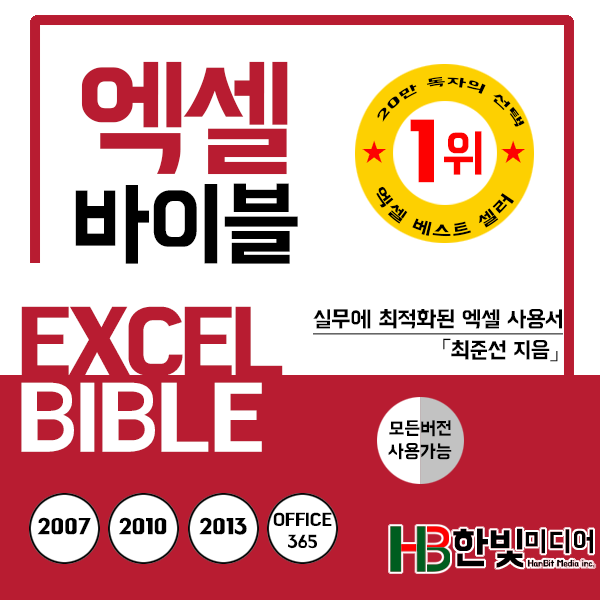
<style>
.page{position:relative;width:600px;height:600px;background:#ffffff}
.page>*{position:absolute;margin:0}
.t1{font:94.7px/123.1px "BMHANNAPro";letter-spacing:-0.025em;color:#000000}
.t2{font:132.6px/9.5px "BMHANNAPro";letter-spacing:-0.065em;color:#b81c31}
.t3{font:11.7px "BMHANNAPro";letter-spacing:0.035em;color:#000000}
.t4{font:86.1px "BMHANNAPro";letter-spacing:0.035em;color:#fd0101}
.t5{font:51.7px "BMHANNAPro";letter-spacing:0.035em;color:#fd0101}
.t6{font:29.7px "New-Gulim";letter-spacing:0.035em;color:#fd0101}
.t7{font:16.8px "BMHANNAPro";letter-spacing:0.035em;color:#000000}
.t8{font:23.1px/24.8px "BMHANNAPro";letter-spacing:-0.025em;color:#000000;text-decoration:underline}
.t9{font:23.1px/30.5px "NanumBarunGothic";letter-spacing:-0.025em;color:#000000}
.t10{font:23.1px/30.5px "BMHANNAPro";letter-spacing:-0.025em;color:#000000}
.t11{font:19px "BMHANNAPro";letter-spacing:-0.01em;color:#000000}
.t12{font:22px "BMHANNAPro";letter-spacing:-0.01em;color:#000000;font-weight:bold}
.t13{font:17.9px "BMHANNAPro";letter-spacing:-0.01em;color:#000000}
</style>
<div class="page">
<p class="t1" style="left:75px;top:61px;width:223px;height:203px;text-align:center"><span class="t2">엑셀<br></span>바이블</p>
<p class="t3" style="left:377px;top:76px;width:148px;height:51px;rotate:3deg">20만 독자의 선택</p>
<p class="t4" style="left:410px;top:119px;width:72px;height:64px">1<span class="t5">위</span></p>
<p class="t6" style="left:362px;top:140px;width:24px;height:23px">★</p>
<p class="t6" style="left:501px;top:140px;width:24px;height:23px">★</p>
<p class="t7" style="left:376px;top:186px;width:139px;height:51px;rotate:3deg">엑셀 베스트 셀러</p>
<p class="t8" style="left:313px;top:309px;width:250px;height:53px;text-align:right">실무에 최적화된 엑셀 사용서<br><span class="t9">「</span><span class="t10">최준선 지음</span><span class="t9">」</span></p>
<p class="t11" style="left:388px;top:420px;width:64px;height:40px;text-align:center">모든버전<br>사용가능</p>
<p class="t12" style="left:37px;top:517px;width:54px;height:18px">2007</p>
<p class="t12" style="left:119px;top:517px;width:48px;height:18px">2010</p>
<p class="t12" style="left:199px;top:517px;width:48px;height:18px">2013</p>
<p class="t13" style="left:273px;top:512px;width:59px;height:37px;text-align:center">OFFICE<br>365</p>
</div>
